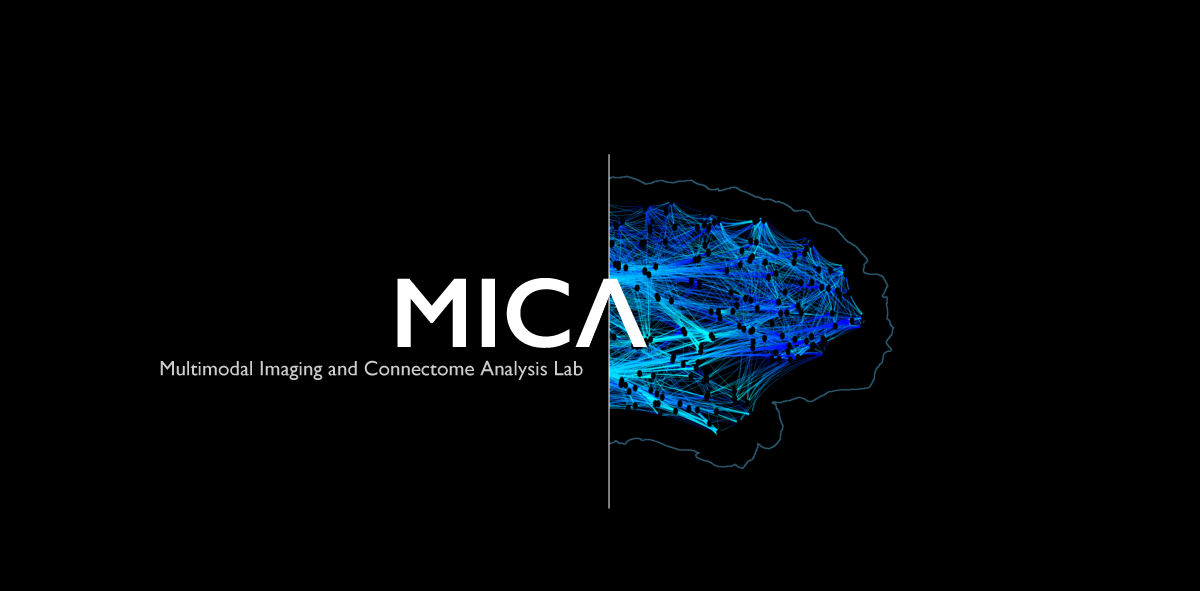
<style>
.page{position:relative;width:1200px;height:591px;background:#000000}
.page>*{position:absolute;margin:0}
.t1{font:20.8px "GillSans";color:#cccccc}
</style>
<div class="page">
<p class="t1" style="left:160px;top:360px;width:423px;height:20px">Multimodal Imaging and Connectome Analysis Lab</p>
</div>
